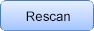
<style>
.page{position:relative;width:94px;height:31px}
.page>*{position:absolute;margin:0}
.t1{font:13.3px "ArialMT";color:#000000}
</style>
<div class="page">
<p class="t1" style="left:26px;top:11px;width:44px;height:10px">Rescan</p>
</div>
